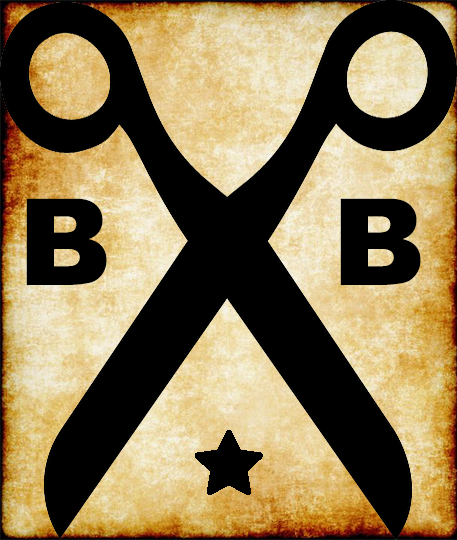
<style>
.page{position:relative;width:457px;height:540px;background:#000000}
.page>*{position:absolute;margin:0}
.t1{font:120px "Arial-Black";color:#000000}
</style>
<div class="page">
<p class="t1" style="left:26px;top:198px;width:81px;height:87px">B</p>
<p class="t1" style="left:340px;top:198px;width:81px;height:87px">B</p>
</div>
